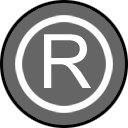
<style>
.page{position:relative;width:128px;height:128px;background:#656565}
.page>*{position:absolute;margin:0}
.t1{font:75px "ArialMT";letter-spacing:0.2em;color:#ffffff}
</style>
<div class="page">
<p class="t1" style="left:44px;top:34px;width:47px;height:54px">R</p>
</div>
